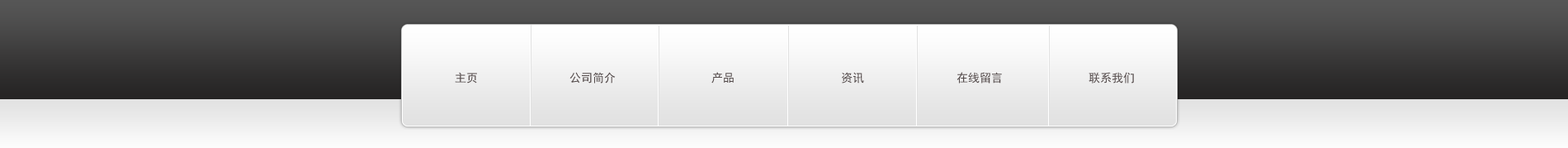
<style>
.page{position:relative;width:1568px;height:148px}
.page>*{position:absolute;margin:0}
.t1{font:11.6px "SimHei";color:#544b4b}
</style>
<div class="page">
<p class="t1" style="left:455px;top:72px;width:22px;height:11px">主页</p>
<p class="t1" style="left:569px;top:72px;width:47px;height:11px">公司简介</p>
<p class="t1" style="left:711px;top:72px;width:23px;height:11px">产品</p>
<p class="t1" style="left:842px;top:72px;width:22px;height:11px">资讯</p>
<p class="t1" style="left:956px;top:72px;width:46px;height:11px">在线留言</p>
<p class="t1" style="left:1089px;top:72px;width:45px;height:11px">联系我们</p>
</div>
